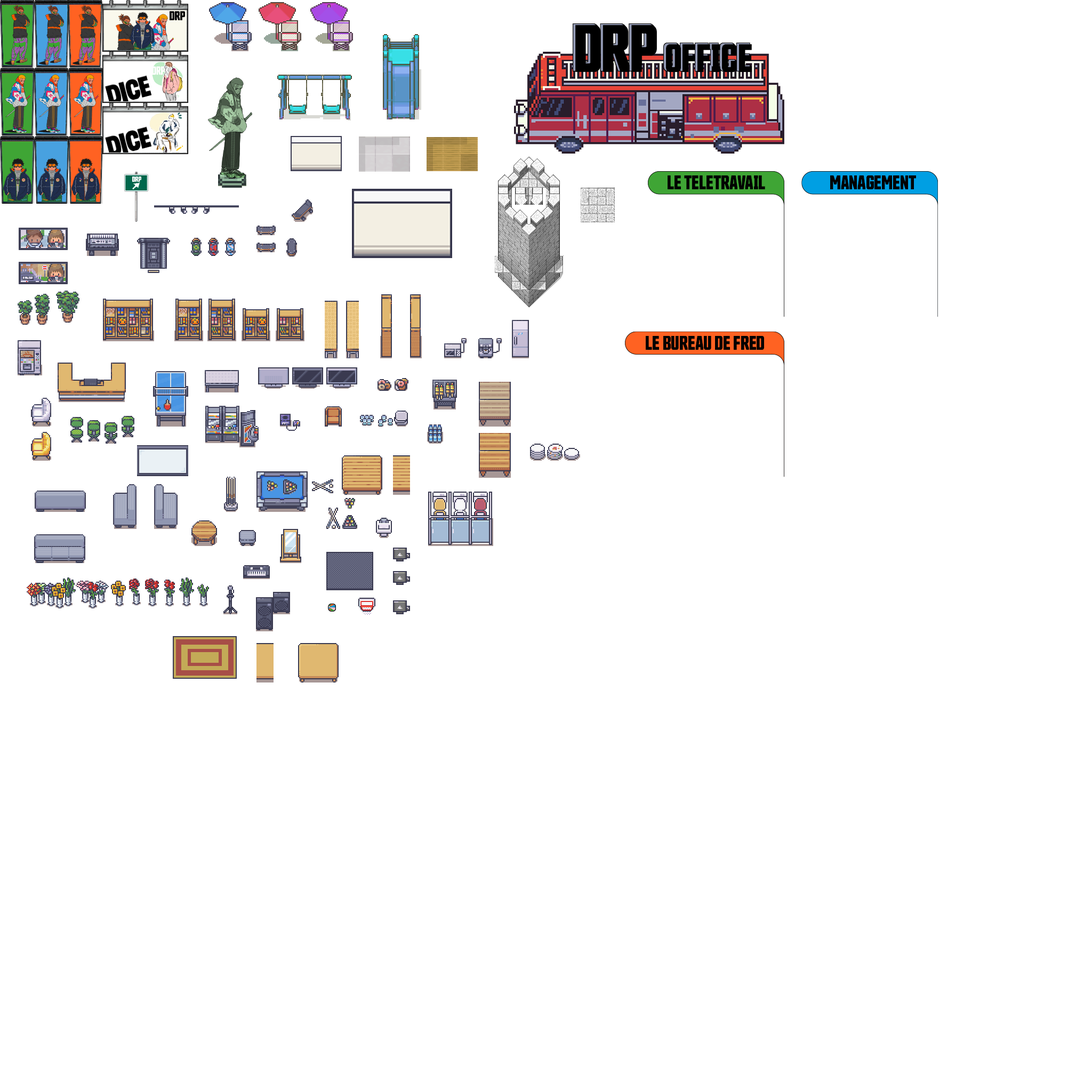
<style>
.page{position:relative;width:1092px;height:1092px;background:#ffffff}
.page>*{position:absolute;margin:0}
.t1{font:38.4px "Countach-Bold";color:#010101}
.t2{font:19.2px "Countach-Bold";color:#010101}
</style>
<div class="page">
<p class="t1" style="left:666px;top:44px;width:86px;height:28px">OFFICE</p>
<p class="t2" style="left:668px;top:175px;width:97px;height:14px">LE TELETRAVAIL</p>
<p class="t2" style="left:830px;top:175px;width:86px;height:14px">MANAGEMENT</p>
<p class="t2" style="left:646px;top:336px;width:118px;height:14px">LE BUREAU DE FRED</p>
</div>
